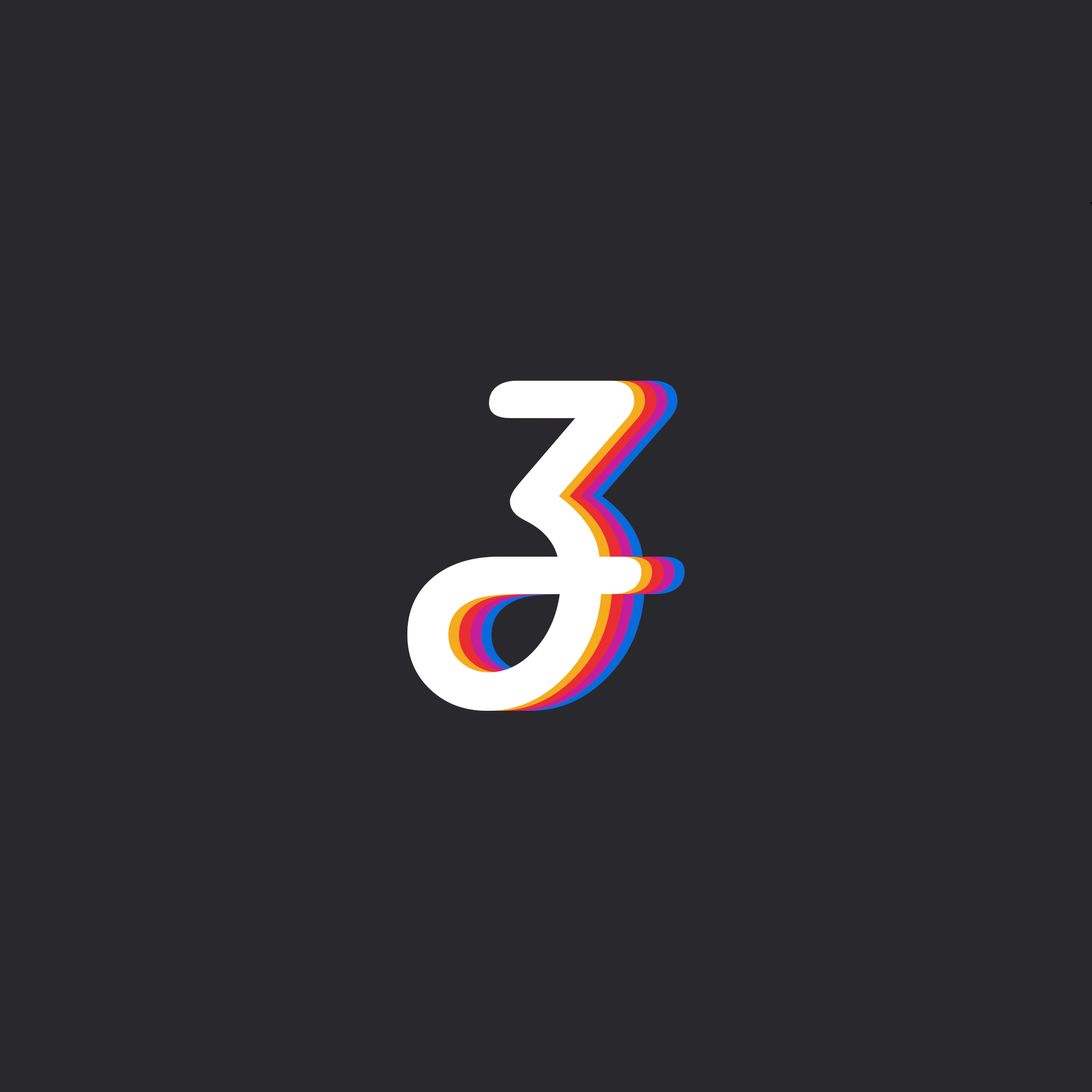
<style>
.page{position:relative;width:1092px;height:1092px;background:#29282c}
.page>*{position:absolute;margin:0}
.t1{font:319.9px "HarlowSolid";color:#ffffff}
.t2{font:319.9px "HarlowSolid"}
</style>
<div class="page">
<p class="t1" style="left:407px;top:381px;width:234px;height:330px">Z</p>
<p class="t1" style="left:418px;top:381px;width:234px;height:330px">Z</p>
<p class="t1" style="left:430px;top:381px;width:234px;height:330px">Z</p>
<p class="t2" style="left:440px;top:381px;width:234px;height:330px">Z</p>
<p class="t2" style="left:451px;top:381px;width:234px;height:330px">Z</p>
</div>
